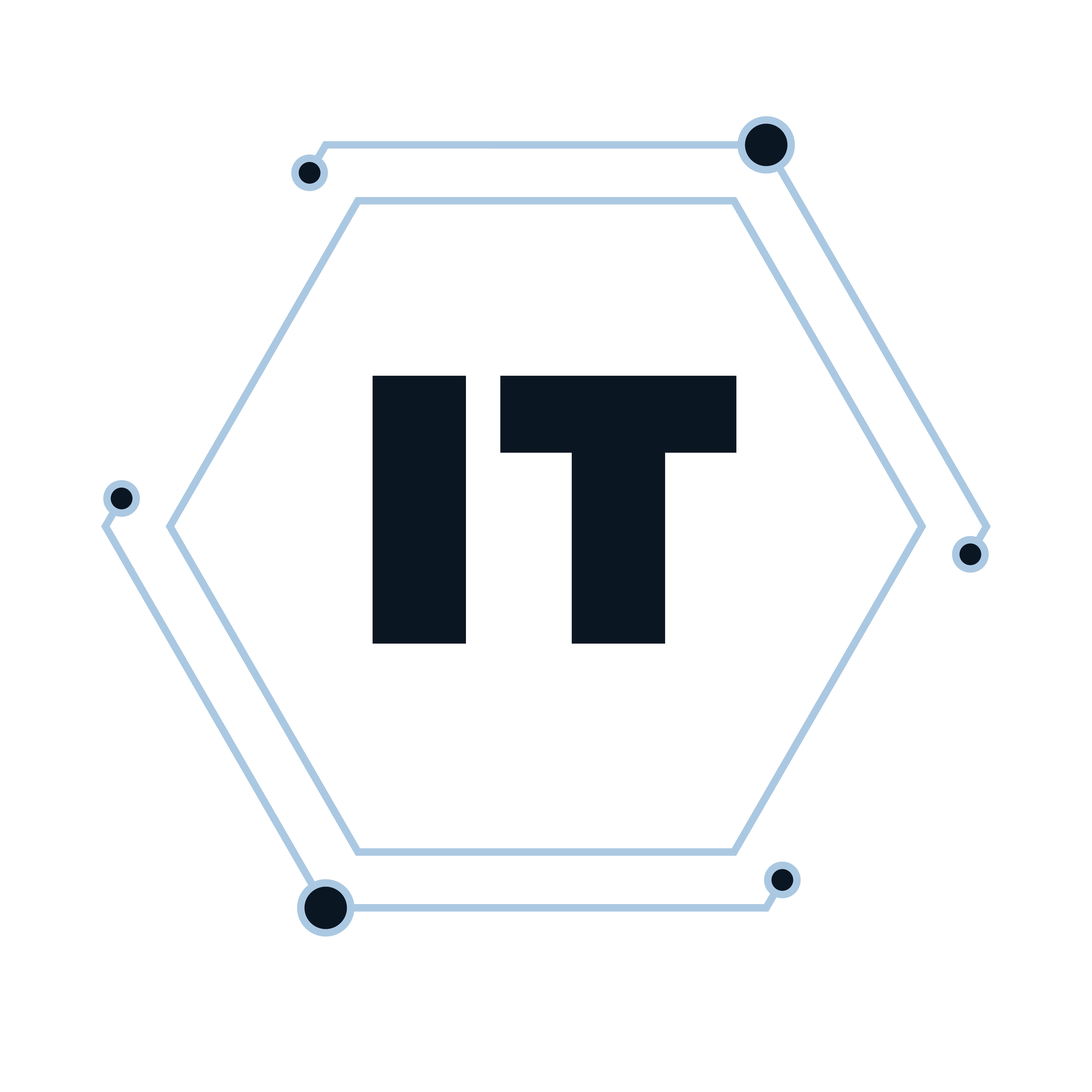
<style>
.page{position:relative;width:1092px;height:1092px;background:#ffffff}
.page>*{position:absolute;margin:0}
.t1{font:401.8px "Bauhaus93";color:#0b1623;scale:1.17 1}
</style>
<div class="page">
<p class="t1" style="left:372px;top:376px;width:364px;height:268px">IT</p>
</div>
